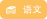
<style>
.page{position:relative;width:47px;height:19px;background:#fbbf5c}
.page>*{position:absolute;margin:0}
.t1{font:9.1px "AdobeHeitiStd-Regular"}
</style>
<div class="page">
<p class="t1" style="left:23px;top:5px;width:19px;height:9px">语文</p>
</div>
